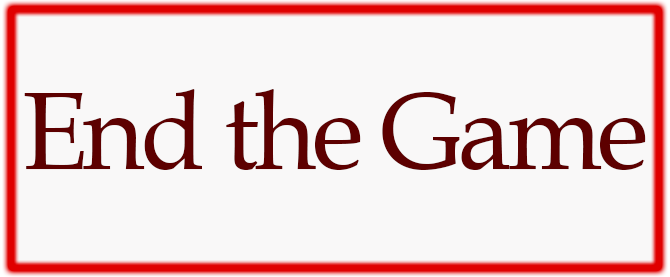
<style>
.page{position:relative;width:670px;height:277px;background:#f9f8f8}
.page>*{position:absolute;margin:0}
.t1{font:110px "BookAntiqua";letter-spacing:-0.04em;color:#5d0000;scale:0.97 1}
</style>
<div class="page">
<p class="t1" style="left:24px;top:89px;width:622px;height:81px">End the Game</p>
</div>
